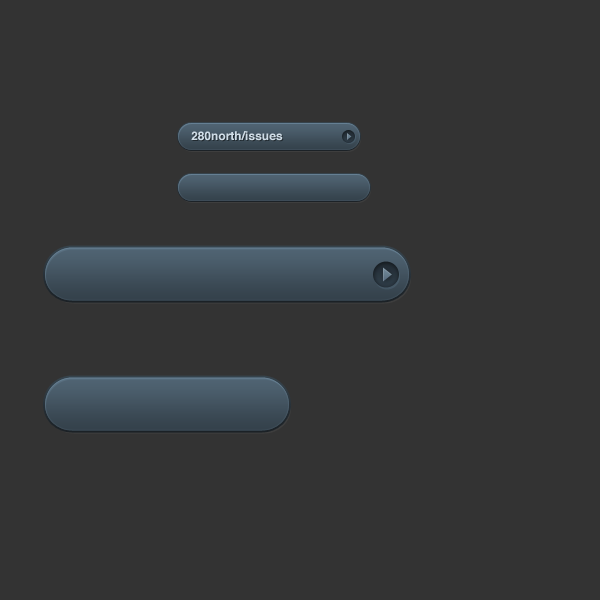
<style>
.page{position:relative;width:600px;height:600px;background:#333333}
.page>*{position:absolute;margin:0}
.t1{font:12px "Helvetica-Bold";color:#cfdce6}
</style>
<div class="page">
<p class="t1" style="left:191px;top:131px;width:92px;height:10px">280north/issues</p>
</div>
